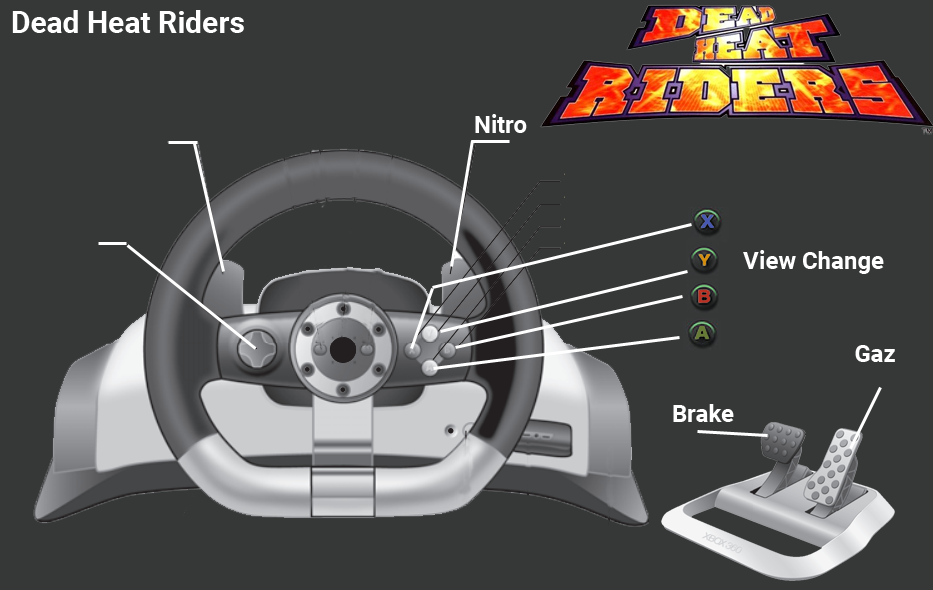
<style>
.page{position:relative;width:933px;height:590px;background:#363838}
.page>*{position:absolute;margin:0}
.t1{font:30px "Roboto-Bold";color:#ffffff}
.t2{font:24px "Roboto-Bold";color:#ffffff}
</style>
<div class="page">
<p class="t1" style="left:12px;top:10px;width:232px;height:23px">Dead Heat Riders</p>
<p class="t2" style="left:475px;top:114px;width:52px;height:19px">Nitro</p>
<p class="t2" style="left:743px;top:250px;width:141px;height:24px">View Change</p>
<p class="t2" style="left:855px;top:345px;width:40px;height:17px">Gaz</p>
<p class="t2" style="left:673px;top:404px;width:61px;height:18px">Brake</p>
</div>
